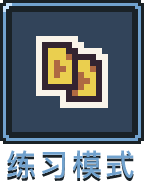
<style>
.page{position:relative;width:144px;height:192px;background:#32445a}
.page>*{position:absolute;margin:0}
.t1{font:30px "PingFang-SC-Bold";letter-spacing:0.1em;color:#71a2ce}
</style>
<div class="page">
<p class="t1" style="left:7px;top:150px;width:127px;height:29px">练习模式</p>
</div>
